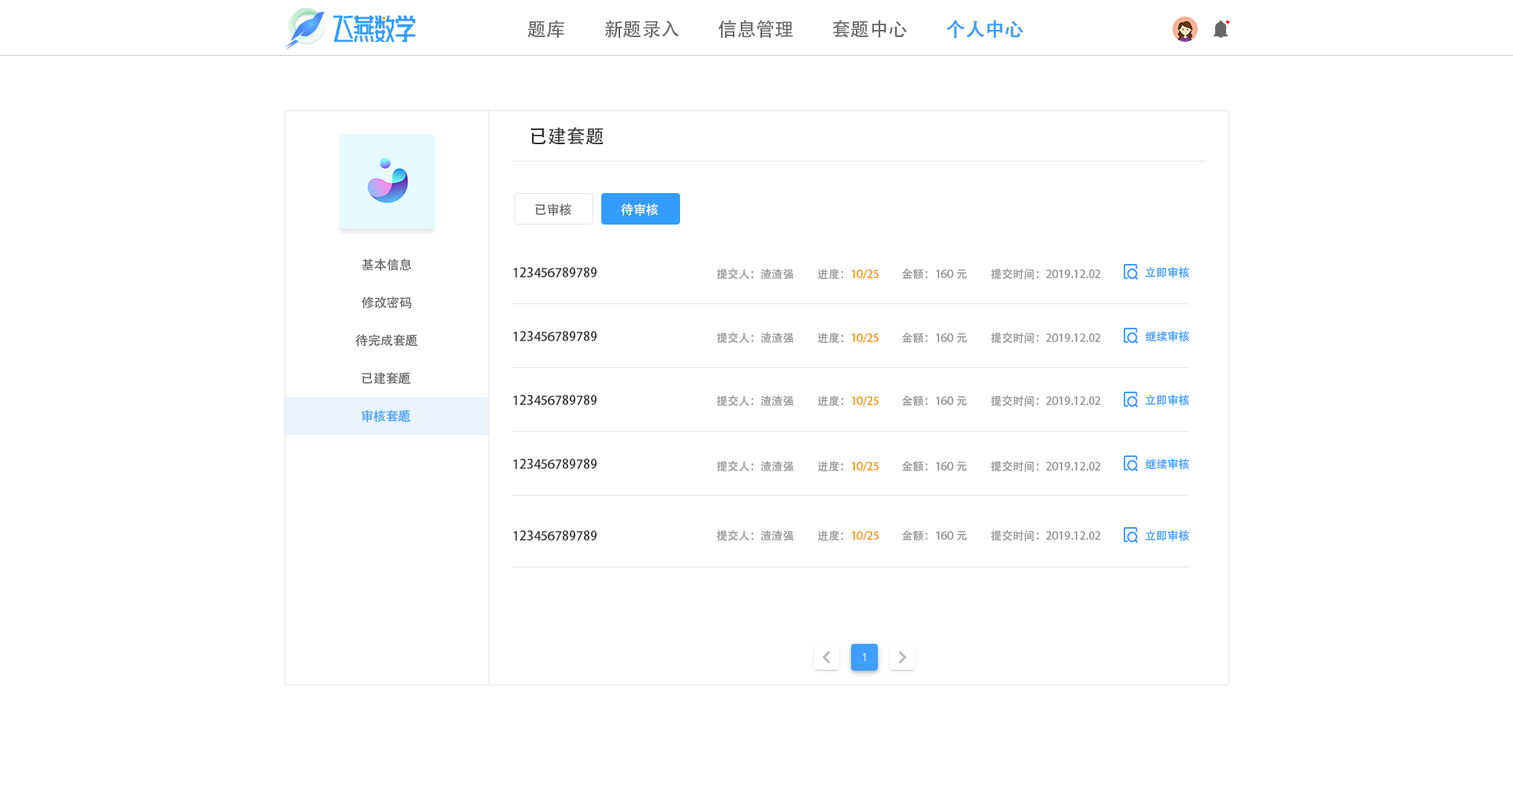
<style>
.page{position:relative;width:1513px;height:788px;background:#ffffff}
.page>*{position:absolute;margin:0}
.t1{font:18.9px "AdobeHeitiStd-Regular";color:#666666}
.t2{font:18.9px "AdobeHeitiStd-Regular";color:#409eff;font-weight:bold}
.t3{font:18.9px "AdobeHeitiStd-Regular";color:#333333}
.t4{font:12.6px "AdobeHeitiStd-Regular";color:#666666}
.t5{font:12.6px "AdobeHeitiStd-Regular";color:#ffffff}
.t6{font:12.6px "AdobeHeitiStd-Regular";color:#333333}
.t7{font:11px "AdobeHeitiStd-Regular";color:#999999}
.t8{font:11px "AdobeHeitiStd-Regular";color:#ff9814}
.t9{font:11px "AdobeHeitiStd-Regular";color:#409eff}
.t10{font:12.6px "AdobeHeitiStd-Regular";color:#409eff}
</style>
<div class="page">
<p class="t1" style="left:527px;top:20px;width:37px;height:18px">题库</p>
<p class="t1" style="left:604px;top:20px;width:75px;height:18px">新题录入</p>
<p class="t1" style="left:718px;top:20px;width:75px;height:19px">信息管理</p>
<p class="t1" style="left:833px;top:20px;width:74px;height:18px">套题中心</p>
<p class="t2" style="left:946px;top:20px;width:78px;height:19px">个人中心</p>
<p class="t3" style="left:530px;top:127px;width:74px;height:18px">已建套题</p>
<p class="t4" style="left:535px;top:203px;width:36px;height:13px">已审核</p>
<p class="t5" style="left:621px;top:203px;width:37px;height:13px">待审核</p>
<p class="t4" style="left:362px;top:258px;width:50px;height:13px">基本信息</p>
<p class="t6" style="left:513px;top:267px;width:84px;height:10px">123456789789</p>
<p class="t7" style="left:716px;top:268px;width:78px;height:12px">提交人：渣渣强</p>
<p class="t8" style="left:818px;top:269px;width:61px;height:11px"><span class="t7">进度：</span>10/25</p>
<p class="t7" style="left:902px;top:269px;width:65px;height:10px">金额：160元</p>
<p class="t7" style="left:991px;top:268px;width:110px;height:12px">提交时间：2019.12.02</p>
<p class="t9" style="left:1145px;top:267px;width:44px;height:11px">立即审核</p>
<p class="t4" style="left:362px;top:296px;width:49px;height:13px">修改密码</p>
<p class="t4" style="left:355px;top:334px;width:63px;height:13px">待完成套题</p>
<p class="t6" style="left:513px;top:331px;width:84px;height:10px">123456789789</p>
<p class="t7" style="left:716px;top:332px;width:78px;height:12px">提交人：渣渣强</p>
<p class="t8" style="left:818px;top:333px;width:61px;height:11px"><span class="t7">进度：</span>10/25</p>
<p class="t7" style="left:902px;top:333px;width:65px;height:10px">金额：160元</p>
<p class="t7" style="left:991px;top:332px;width:110px;height:12px">提交时间：2019.12.02</p>
<p class="t9" style="left:1145px;top:331px;width:44px;height:11px">继续审核</p>
<p class="t4" style="left:362px;top:372px;width:49px;height:13px">已建套题</p>
<p class="t6" style="left:513px;top:395px;width:84px;height:10px">123456789789</p>
<p class="t7" style="left:716px;top:395px;width:78px;height:12px">提交人：渣渣强</p>
<p class="t8" style="left:818px;top:396px;width:61px;height:11px"><span class="t7">进度：</span>10/25</p>
<p class="t7" style="left:902px;top:396px;width:65px;height:10px">金额：160元</p>
<p class="t7" style="left:991px;top:395px;width:110px;height:12px">提交时间：2019.12.02</p>
<p class="t9" style="left:1145px;top:395px;width:44px;height:11px">立即审核</p>
<p class="t10" style="left:362px;top:410px;width:49px;height:12px">审核套题</p>
<p class="t6" style="left:513px;top:459px;width:84px;height:10px">123456789789</p>
<p class="t7" style="left:716px;top:460px;width:78px;height:12px">提交人：渣渣强</p>
<p class="t8" style="left:818px;top:461px;width:61px;height:11px"><span class="t7">进度：</span>10/25</p>
<p class="t7" style="left:902px;top:461px;width:65px;height:10px">金额：160元</p>
<p class="t7" style="left:991px;top:460px;width:110px;height:12px">提交时间：2019.12.02</p>
<p class="t9" style="left:1145px;top:459px;width:44px;height:11px">继续审核</p>
<p class="t6" style="left:513px;top:530px;width:84px;height:11px">123456789789</p>
<p class="t7" style="left:716px;top:530px;width:78px;height:11px">提交人：渣渣强</p>
<p class="t8" style="left:818px;top:530px;width:61px;height:11px"><span class="t7">进度：</span>10/25</p>
<p class="t7" style="left:902px;top:530px;width:65px;height:11px">金额：160元</p>
<p class="t7" style="left:991px;top:530px;width:110px;height:11px">提交时间：2019.12.02</p>
<p class="t9" style="left:1145px;top:530px;width:44px;height:11px">立即审核</p>
</div>
